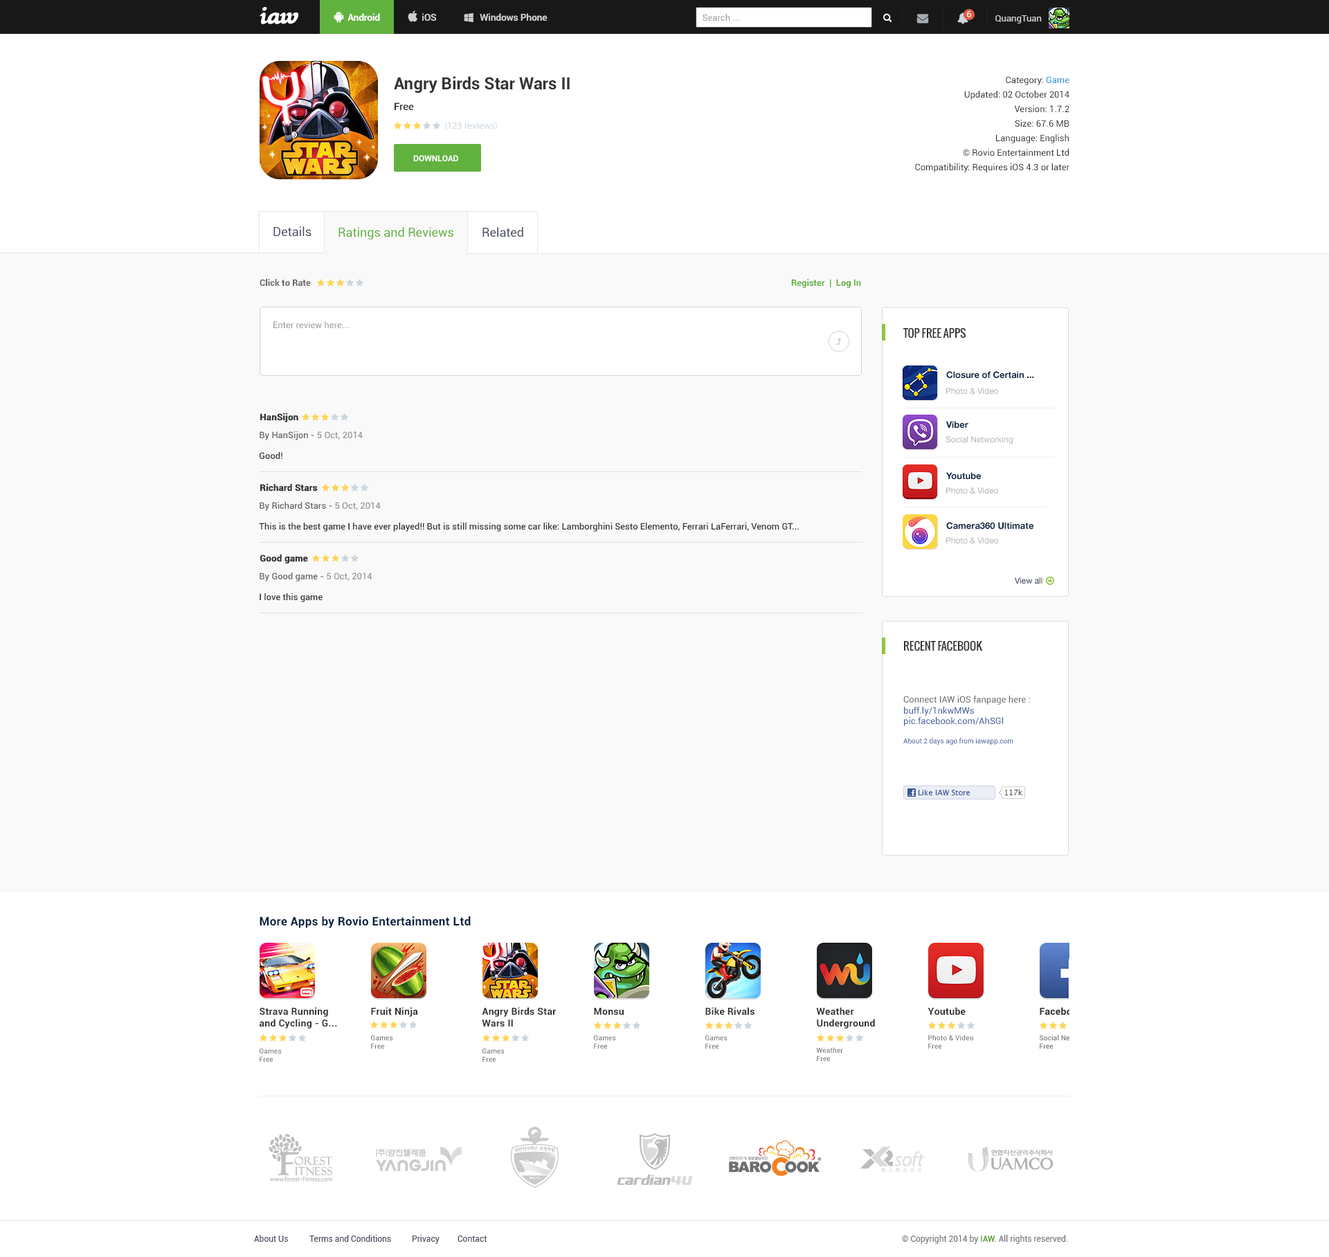
<style>
.page{position:relative;width:1329px;height:1257px;background:#ffffff}
.page>*{position:absolute;margin:0}
.t1{font:30.5px "BlackRose";color:#ffffff}
.t2{font:9px "Roboto-Regular";color:#999999}
.t3{font:8.3px "OpenSans";letter-spacing:-0.02em;color:#ffffff}
.t4{font:9px "Roboto-Regular";color:#cdcdcd}
.t5{font:16.6px "Roboto-Bold";color:#333333}
.t6{font:9px/14.5px "Roboto-Regular";color:#333333}
.t7{font:9px/14.5px "Roboto-Regular";color:#298cda}
.t8{font:10.4px "Roboto-Medium";color:#333333}
.t9{font:8.3px "Roboto-Bold";color:#ffffff;text-transform:uppercase}
.t10{font:12.5px "Roboto-Regular";color:#464d5d}
.t11{font:12.5px "Roboto-Regular";color:#62b23f}
.t12{font:9px "Roboto-Bold";color:#666666}
.t13{font:9px "Roboto-Bold";color:#62b23f}
.t14{font:11.1px "Oswald";color:#333333;text-transform:uppercase}
.t15{font:9px "HelveticaNeue-Bold";color:#06203f}
.t16{font:8.3px "HelveticaNeue";color:#b4b4b4}
.t17{font:9px "Roboto-Bold";color:#333333;font-weight:bold}
.t18{font:9px "Roboto-Medium";color:#666666}
.t19{font:9px "Roboto-Medium";color:#999999}
.t20{font:9px "Roboto-Medium";color:#333333}
.t21{font:8.3px "HelveticaNeue";color:#06203f}
.t22{font:9px "Roboto-Regular";color:#3b5998}
.t23{font:9px "Roboto-Regular";color:#666666}
.t24{font:6.9px "Roboto-Regular";color:#3b5998}
.t25{font:7.3px "LucidaGrande";letter-spacing:0.02em;color:#3b5998}
.t26{font:7.6px "LucidaGrande";letter-spacing:-0.01em}
.t27{font:11.8px "Roboto-Bold";letter-spacing:0.02em;color:#06203f}
.t28{font:9.7px "Roboto-Bold";letter-spacing:0.02em;color:#333333}
.t29{font:6.9px "Roboto-Regular";letter-spacing:0.02em;color:#666666}
.t30{font:8.3px "Roboto-Regular";color:#464d5d}
.t31{font:8.3px "Roboto-Regular";color:#7a7a7a}
.t32{font:8.3px "Roboto-Regular";color:#509a25}
</style>
<div class="page">
<p class="t1" style="left:260px;top:7px;width:38px;height:17px">iaw</p>
<p class="t2" style="left:703px;top:14px;width:36px;height:7px">Search ...</p>
<p class="t3" style="left:967px;top:11px;width:4px;height:6px">6</p>
<p class="t4" style="left:996px;top:15px;width:46px;height:9px">QuangTuan</p>
<p class="t5" style="left:394px;top:76px;width:176px;height:17px">Angry Birds Star Wars II</p>
<p class="t6" style="left:915px;top:76px;width:155px;height:96px;text-align:right">Category: <span class="t7">Game<br></span>Updated: 02 October 2014<br>Version: 1.7.2<br>Size: 67.6 MB<br>Language: English<br>© Rovio Entertainment Ltd<br>Compatibility: Requires iOS 4.3 or later</p>
<p class="t8" style="left:395px;top:102px;width:19px;height:8px">Free</p>
<p class="t9" style="left:413px;top:155px;width:45px;height:6px">Download</p>
<p class="t10" style="left:273px;top:226px;width:39px;height:11px">Details</p>
<p class="t11" style="left:339px;top:227px;width:114px;height:13px">Ratings and Reviews</p>
<p class="t10" style="left:483px;top:227px;width:40px;height:10px">Related</p>
<p class="t12" style="left:260px;top:279px;width:51px;height:8px">Click to Rate</p>
<p class="t13" style="left:791px;top:279px;width:70px;height:9px">Register  |  Log In</p>
<p class="t2" style="left:273px;top:321px;width:75px;height:7px">Enter review here...</p>
<p class="t14" style="left:903px;top:327px;width:63px;height:12px">TOP FREE APPS</p>
<p class="t15" style="left:946px;top:371px;width:88px;height:8px">Closure of Certain ...</p>
<p class="t16" style="left:946px;top:388px;width:52px;height:7px">Photo &amp; Video</p>
<p class="t17" style="left:260px;top:413px;width:38px;height:9px">HanSijon</p>
<p class="t15" style="left:946px;top:421px;width:23px;height:8px">Viber</p>
<p class="t18" style="left:260px;top:431px;width:103px;height:9px">By HanSijon - <span class="t19">5 Oct, 2014</span></p>
<p class="t16" style="left:946px;top:436px;width:67px;height:8px">Social Networking</p>
<p class="t20" style="left:260px;top:452px;width:22px;height:7px">Good!</p>
<p class="t15" style="left:946px;top:472px;width:35px;height:8px">Youtube</p>
<p class="t17" style="left:260px;top:484px;width:58px;height:8px">Richard Stars</p>
<p class="t16" style="left:946px;top:487px;width:52px;height:7px">Photo &amp; Video</p>
<p class="t18" style="left:260px;top:502px;width:121px;height:9px">By Richard Stars - <span class="t19">5 Oct, 2014</span></p>
<p class="t20" style="left:259px;top:523px;width:540px;height:9px">This is the best game I have ever played!! But is still missing some car like: Lamborghini Sesto Elemento, Ferrari LaFerrari, Venom GT...</p>
<p class="t15" style="left:946px;top:522px;width:88px;height:8px">Camera360 Ultimate</p>
<p class="t16" style="left:946px;top:537px;width:52px;height:7px">Photo &amp; Video</p>
<p class="t17" style="left:260px;top:555px;width:48px;height:9px">Good game</p>
<p class="t18" style="left:260px;top:573px;width:112px;height:9px">By Good game - <span class="t19">5 Oct, 2014</span></p>
<p class="t21" style="left:1015px;top:577px;width:28px;height:7px">View all</p>
<p class="t20" style="left:260px;top:593px;width:63px;height:9px">I love this game</p>
<p class="t14" style="left:904px;top:640px;width:79px;height:11px">Recent Facebook</p>
<p class="t22" style="left:903px;top:696px;width:127px;height:49px"><span class="t23">Connect IAW iOS fanpage here :<br></span>buff.ly/1nkwMWs<br>pic.facebook.com/AhSGl<br><br><span class="t24">About 2 days ago from iawapp.com</span></p>
<p class="t25" style="left:918px;top:790px;width:52px;height:5px">Like IAW Store</p>
<p class="t26" style="left:1005px;top:789px;width:18px;height:6px">117k</p>
<p class="t27" style="left:260px;top:917px;width:211px;height:11px">More Apps by Rovio Entertainment Ltd</p>
<p class="t28" style="left:260px;top:1007px;width:77px;height:22px">Strava Running<br>and Cycling - G...</p>
<p class="t28" style="left:371px;top:1007px;width:47px;height:10px">Fruit Ninja</p>
<p class="t28" style="left:482px;top:1007px;width:74px;height:20px">Angry Birds Star<br>Wars II</p>
<p class="t28" style="left:594px;top:1008px;width:30px;height:8px">Monsu</p>
<p class="t28" style="left:705px;top:1007px;width:50px;height:9px">Bike Rivals</p>
<p class="t28" style="left:816px;top:1007px;width:59px;height:22px">Weather<br>Underground</p>
<p class="t28" style="left:928px;top:1007px;width:38px;height:9px">Youtube</p>
<p class="t29" style="left:371px;top:1035px;width:22px;height:14px">Games<br>Free</p>
<p class="t29" style="left:594px;top:1035px;width:22px;height:14px">Games<br>Free</p>
<p class="t29" style="left:705px;top:1035px;width:23px;height:14px">Games<br>Free</p>
<p class="t29" style="left:928px;top:1035px;width:45px;height:14px">Photo &amp; Video<br>Free</p>
<p class="t29" style="left:260px;top:1048px;width:22px;height:14px">Games<br>Free</p>
<p class="t29" style="left:483px;top:1048px;width:22px;height:14px">Games<br>Free</p>
<p class="t29" style="left:816px;top:1047px;width:27px;height:14px">Weather<br>Free</p>
<p class="t30" style="left:254px;top:1235px;width:34px;height:7px">About Us</p>
<p class="t30" style="left:309px;top:1235px;width:82px;height:7px">Terms and Conditions</p>
<p class="t30" style="left:412px;top:1235px;width:28px;height:9px">Privacy</p>
<p class="t30" style="left:458px;top:1236px;width:29px;height:6px">Contact</p>
<p class="t31" style="left:902px;top:1235px;width:166px;height:9px">© Copyright 2014 by <span class="t32">IAW</span>. All rights reserved.</p>
</div>
